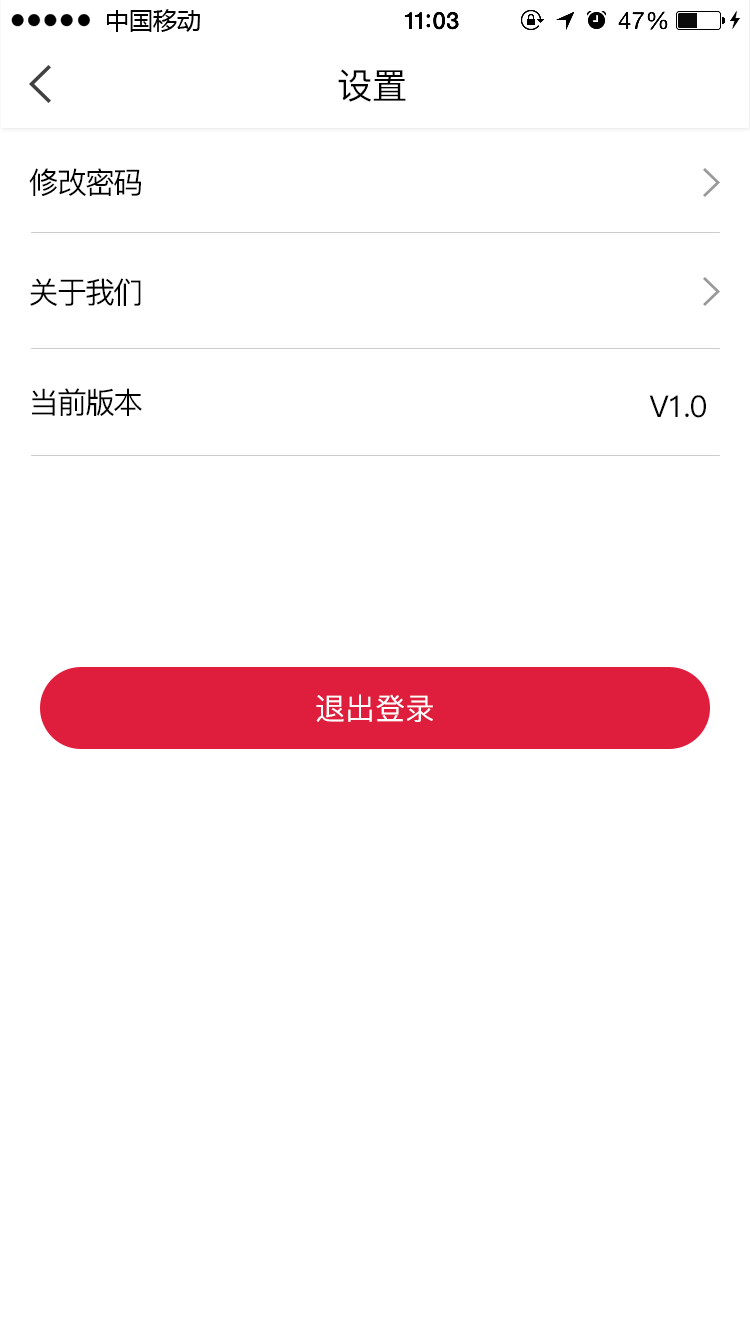
<style>
.page{position:relative;width:750px;height:1334px;background:#ffffff}
.page>*{position:absolute;margin:0}
.t1{font:35.7px "PingFang-SC-Medium";color:#000000}
.t2{font:30px/110px "PingFang-SC-Medium";letter-spacing:-0.06em;color:#000000}
.t3{font:30px "PingFang-SC-Medium";letter-spacing:-0.06em;color:#000000}
.t4{font:30px "PingFang-SC-Medium";color:#ffffff}
</style>
<div class="page">
<p class="t1" style="left:338px;top:69px;width:68px;height:33px">设置</p>
<p class="t2" style="left:29px;top:168px;width:113px;height:248px">修改密码<br>关于我们<br>当前版本</p>
<p class="t3" style="left:649px;top:395px;width:57px;height:23px">V1.0</p>
<p class="t4" style="left:316px;top:694px;width:117px;height:28px">退出登录</p>
</div>
